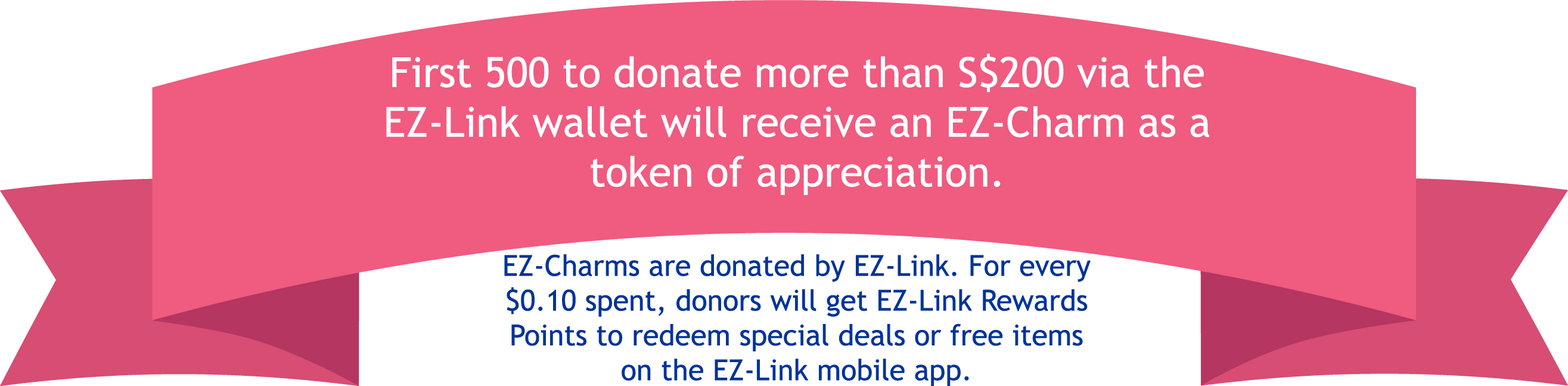
<style>
.page{position:relative;width:1568px;height:386px;background:#f05b80}
.page>*{position:absolute;margin:0}
.t1{font:41.4px "TrebuchetMS";color:#ffffff}
.t2{font:29px "TrebuchetMS";color:#003399}
</style>
<div class="page">
<p class="t1" style="left:386px;top:54px;width:823px;height:141px;text-align:center">First 500 to donate more than S$200 via the<br>EZ-Link wallet will receive an EZ-Charm as a<br>token of appreciation.</p>
<p class="t2" style="left:504px;top:254px;width:587px;height:132px;text-align:center">EZ-Charms are donated by EZ-Link. For every<br>$0.10 spent, donors will get EZ-Link Rewards<br>Points to redeem special deals or free items<br>on the EZ-Link mobile app.</p>
</div>
